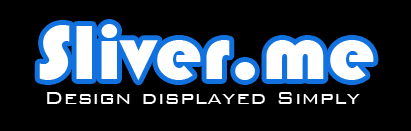
<style>
.page{position:relative;width:411px;height:131px;background:#000000}
.page>*{position:absolute;margin:0}
.t1{font:79.4px "Bauhaus93";color:#ffffff;scale:1.08 1}
.t2{font:24px "BankGothic-Light";color:#fdfcfc}
</style>
<div class="page">
<p class="t1" style="left:39px;top:24px;width:335px;height:57px">Sliver.me</p>
<p class="t2" style="left:47px;top:92px;width:313px;height:12px">Design displayed Simply</p>
</div>
